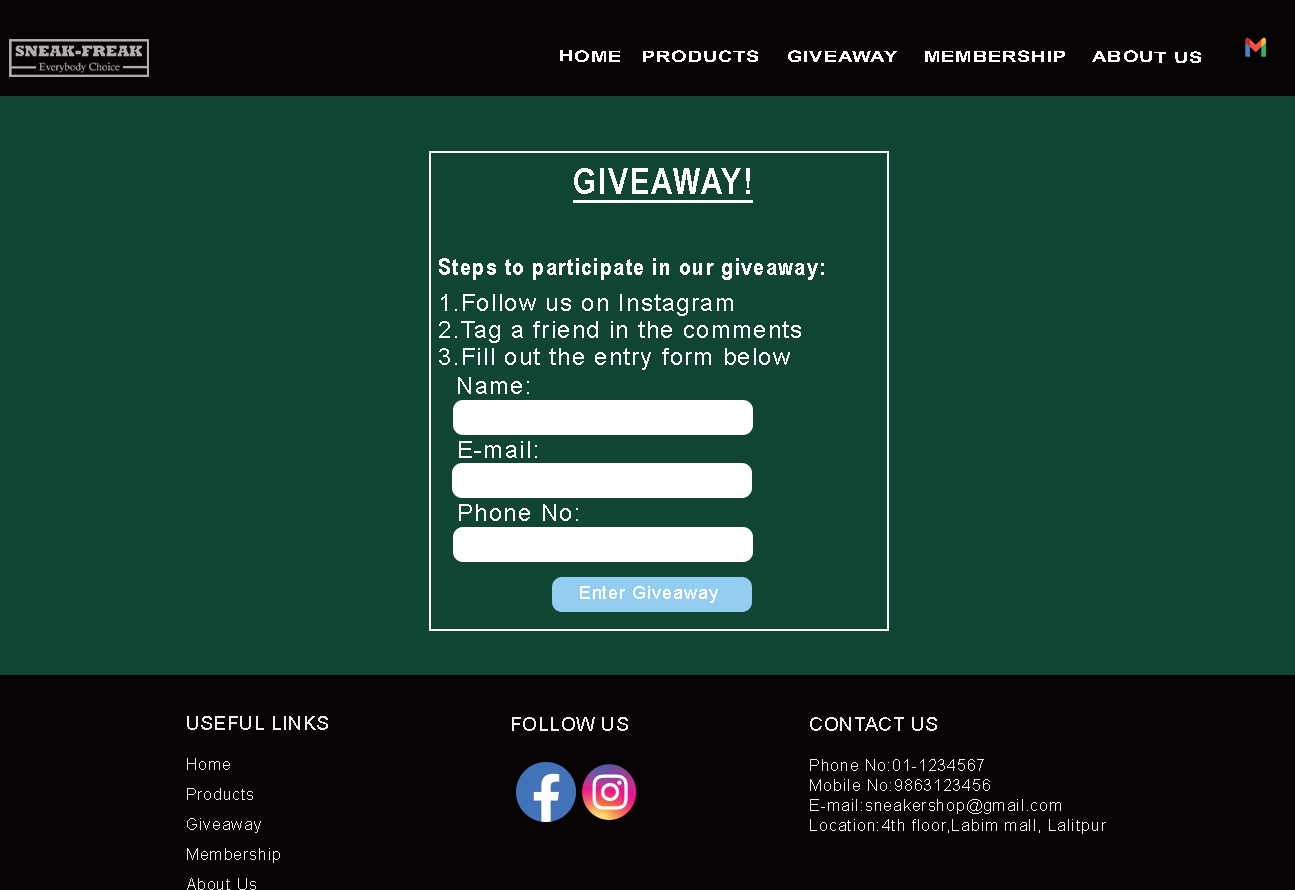
<style>
.page{position:relative;width:1295px;height:890px;background:#114533}
.page>*{position:absolute;margin:0}
.t1{font:16px "Arial-BoldMT";letter-spacing:0.052em;color:#ffffff;scale:1.23 1}
.t2{font:36px "ArialNarrow-Bold";letter-spacing:0.052em;color:#ffffff;text-decoration:underline}
.t3{font:24px/9px "ArialMT";letter-spacing:0.052em;color:#ffffff}
.t4{font:24px/9px "ArialNarrow-Bold";letter-spacing:0.052em;color:#ffffff}
.t5{font:24px "ArialMT";letter-spacing:0.052em;color:#ffffff}
.t6{font:18px "ArialMT";letter-spacing:0.052em;color:#ffffff}
.t7{font:16px/10px "ArialMT";letter-spacing:0.052em;color:#efefef}
.t8{font:18.7px/28px "ArialMT";letter-spacing:0.052em;color:#efefef}
.t9{font:16px/20px "ArialMT";letter-spacing:0.052em;color:#efefef}
.t10{font:18.7px "ArialMT";letter-spacing:0.052em;color:#efefef}
.t11{font:18.7px/20px "ArialMT";letter-spacing:0.052em;color:#efefef}
</style>
<div class="page">
<p class="t1" style="left:560px;top:50px;width:641px;height:13px">HOME   PRODUCTS    GIVEAWAY    MEMBERSHIP    ABOUT US</p>
<p class="t2" style="left:573px;top:168px;width:180px;height:35px">GIVEAWAY!</p>
<p class="t3" style="left:439px;top:258px;width:385px;height:112px"><span class="t4">Steps to participate in our giveaway:<br><br><br><br></span>1.Follow us on Instagram<br><br><br>2.Tag a friend in the comments<br>  <br><br>3.Fill out the entry form below</p>
<p class="t5" style="left:458px;top:377px;width:71px;height:17px">Name:</p>
<p class="t5" style="left:459px;top:441px;width:78px;height:17px">E-mail:</p>
<p class="t5" style="left:459px;top:504px;width:119px;height:17px">Phone No:</p>
<p class="t6" style="left:580px;top:586px;width:138px;height:17px">Enter Giveaway</p>
<p class="t7" style="left:187px;top:716px;width:141px;height:174px"><span class="t8">USEFUL LINKS<br><br></span><span class="t9">Home<br><br>Products</span><br><br><br>Giveaway<br><br><br>Membership<br><br><br>About Us</p>
<p class="t10" style="left:512px;top:717px;width:116px;height:14px">FOLLOW US</p>
<p class="t9" style="left:810px;top:717px;width:296px;height:117px"><span class="t11">CONTACT US<br><br></span>Phone No:01-1234567<br>Mobile No:9863123456<br>E-mail:sneakershop@gmail.com<br>Location:4th floor,Labim mall, Lalitpur</p>
</div>
